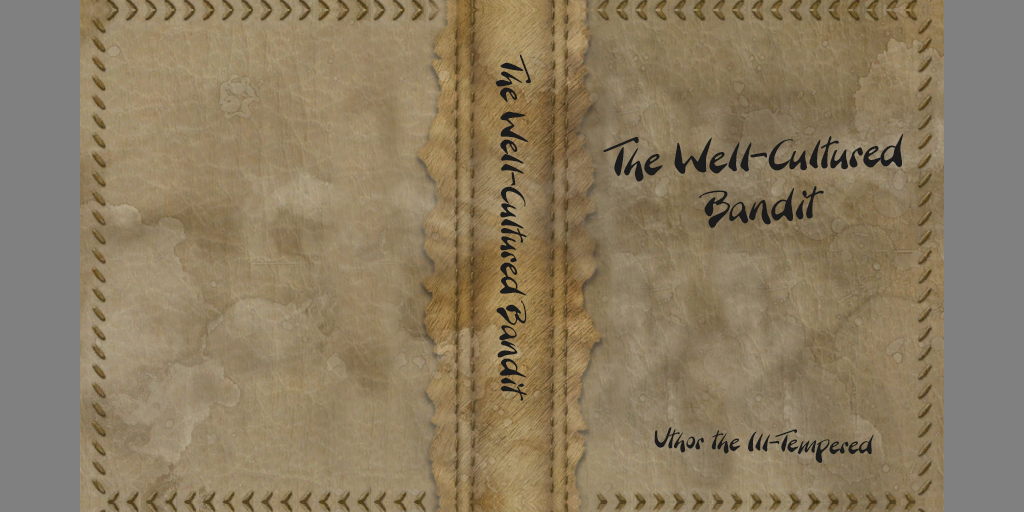
<style>
.page{position:relative;width:1024px;height:512px}
.page>*{position:absolute;margin:0}
.t1{font:33.2px "BranchingMouse-Becker";color:#1b1b1b}
.t2{font:41.5px "BranchingMouse-Becker";color:#1b1b1b}
.t3{font:24.9px "BranchingMouse-Becker";color:#1b1b1b}
</style>
<div class="page">
<p class="t1" style="left:495px;top:54px;width:36px;height:347px;rotate:90deg">The Well-Cultured Bandit</p>
<p class="t2" style="left:603px;top:134px;width:301px;height:94px;text-align:center;rotate:-2deg">The Well-Cultured<br>Bandit</p>
<p class="t3" style="left:654px;top:427px;width:220px;height:36px;rotate:2deg">Uthor the Ill-Tempered</p>
</div>
